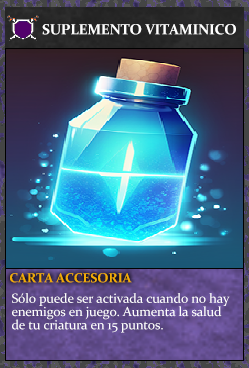
<style>
.page{position:relative;width:249px;height:368px}
.page>*{position:absolute;margin:0}
.t1{font:14.7px "Constantia-Bold";letter-spacing:-0.02em;color:#ffffff}
.t2{font:13.3px "Constantia-Bold";letter-spacing:-0.02em;color:#f2ac05}
.t3{font:13.3px/13.3px "Constantia";letter-spacing:-0.02em;color:#ffffff}
</style>
<div class="page">
<p class="t1" style="left:42px;top:24px;width:194px;height:11px">SUPLEMENTO VITAMINICO</p>
<p class="t2" style="left:10px;top:273px;width:122px;height:10px">CARTA ACCESORIA</p>
<p class="t3" style="left:12px;top:293px;width:218px;height:40px">Sólo puede ser activada cuando no hay<br>enemigos en juego. Aumenta la salud<br>de tu criatura en 15 puntos.</p>
</div>
